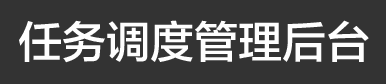
<style>
.page{position:relative;width:386px;height:84px;background:#333333}
.page>*{position:absolute;margin:0}
.t1{font:44px "FZLTZHK--GBK1-0";color:#fefefe}
</style>
<div class="page">
<p class="t1" style="left:19px;top:20px;width:350px;height:43px">任务调度管理后台</p>
</div>
